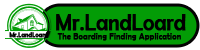
<style>
.page{position:relative;width:200px;height:50px;background:#039c06}
.page>*{position:absolute;margin:0}
.t1{font:23.3px "BerlinSansFB-Reg";color:#000000;font-weight:bold;scale:0.89 1}
.t2{font:6.9px "BerlinSansFB-Reg";color:#000000;font-weight:bold;scale:0.89 1}
.t3{font:9.3px "BerlinSansFB-Reg";color:#000000;font-weight:bold;scale:0.89 1}
</style>
<div class="page">
<p class="t1" style="left:56px;top:14px;width:130px;height:17px">Mr.LandLoard</p>
<p class="t2" style="left:9px;top:32px;width:39px;height:6px">Mr.LandLoard</p>
<p class="t3" style="left:57px;top:33px;width:124px;height:8px">The Boarding Finding Application</p>
</div>
